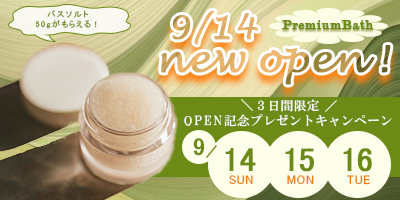
<style>
.page{position:relative;width:400px;height:200px}
.page>*{position:absolute;margin:0}
.t1{font:8.3px/9.3px "MS-PGothic";letter-spacing:0.16em}
.t2{font:8.3px/9.3px "MS-PGothic";letter-spacing:0.06em}
.t3{font:13.9px "Modern-Regular";letter-spacing:0.04em;color:#6c8b16;font-weight:bold}
.t4{font:12.5px "HGSMinchoB";letter-spacing:0.04em;color:#ffffff}
.t5{font:12.5px "HGSMinchoB";letter-spacing:0.16em;color:#ffffff}
.t6{font:24.3px "MS-PGothic";letter-spacing:0.04em;color:#6c8b16;font-weight:bold}
.t7{font:33.3px "MS-PGothic";letter-spacing:0.04em;color:#6c8b16;font-weight:bold}
.t8{font:12.5px "MS-PGothic";letter-spacing:0.04em;color:#ea7d0b}
</style>
<div class="page">
<p class="t1" style="left:35px;top:10px;width:62px;height:19px;text-align:center">バスソルト<br>50gが<span class="t2">もらえる！</span></p>
<p class="t3" style="left:282px;top:20px;width:92px;height:10px">PremiumBath</p>
<p class="t4" style="left:257px;top:99px;width:62px;height:13px">３日間限定</p>
<p class="t4" style="left:184px;top:114px;width:208px;height:13px"><span class="t5">OPEN</span>記念プレゼントキャンペーン</p>
<p class="t6" style="left:193px;top:138px;width:12px;height:18px">9</p>
<p class="t7" style="left:225px;top:148px;width:31px;height:23px">14</p>
<p class="t7" style="left:285px;top:148px;width:29px;height:24px">15</p>
<p class="t7" style="left:343px;top:148px;width:29px;height:24px">16</p>
<p class="t8" style="left:229px;top:175px;width:24px;height:10px">SUN</p>
<p class="t8" style="left:287px;top:175px;width:27px;height:10px">MON</p>
<p class="t8" style="left:346px;top:175px;width:24px;height:10px">TUE</p>
</div>
